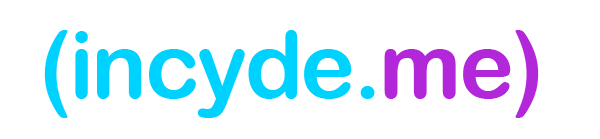
<style>
.page{position:relative;width:600px;height:139px;background:#ffffff}
.page>*{position:absolute;margin:0}
.t1{font:93.2px "ArialRoundedMTBold";letter-spacing:-0.031em;color:#00d2ff}
.t2{font:93.2px "ArialRoundedMTBold";letter-spacing:-0.031em;color:#b227da}
</style>
<div class="page">
<p class="t1" style="left:44px;top:30px;width:495px;height:88px">(incyde.<span class="t2">me)</span></p>
</div>
